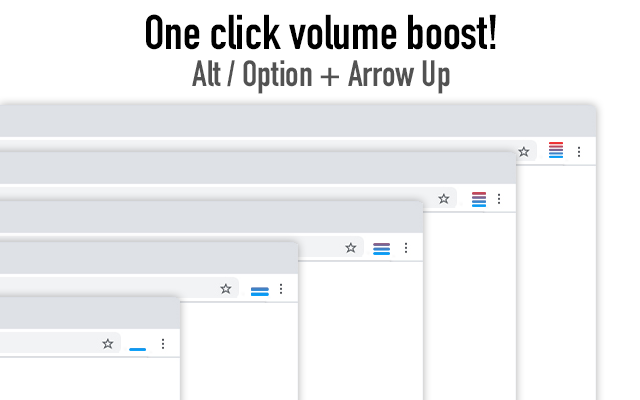
<style>
.page{position:relative;width:640px;height:400px;background:#ffffff}
.page>*{position:absolute;margin:0}
.t1{font:48px "DINCondensed-Bold";color:#000000}
.t2{font:36px "DINCondensed-Bold";color:#525252}
</style>
<div class="page">
<p class="t1" style="left:146px;top:14px;width:350px;height:36px">One click volume boost!</p>
<p class="t2" style="left:192px;top:60px;width:258px;height:34px">Alt / Option + Arrow Up</p>
</div>
